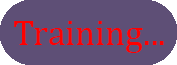
<style>
.page{position:relative;width:177px;height:65px;background:#5e4f76}
.page>*{position:absolute;margin:0}
.t1{font:36px "Cambria";color:#ff0000}
</style>
<div class="page">
<p class="t1" style="left:14px;top:21px;width:150px;height:32px">Training...</p>
</div>
